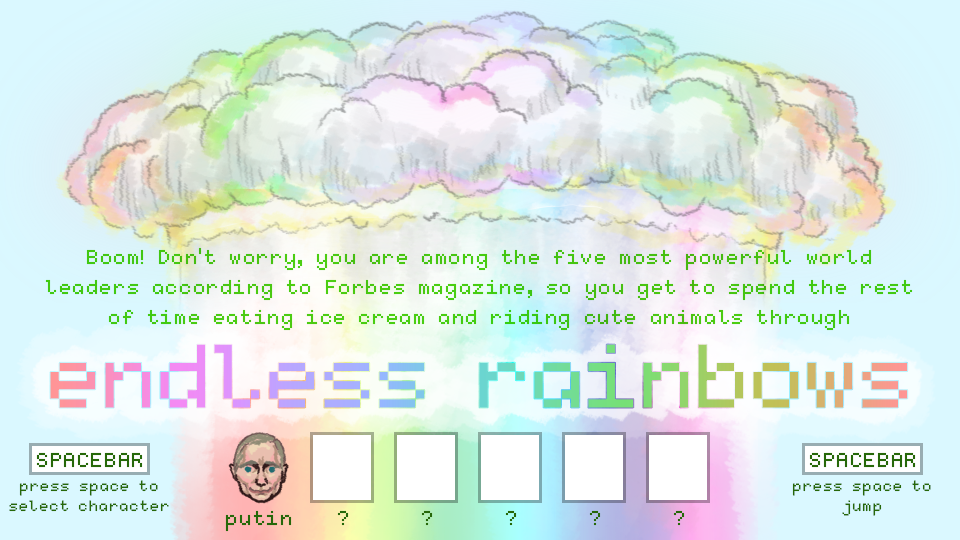
<style>
.page{position:relative;width:960px;height:540px}
.page>*{position:absolute;margin:0}
.t1{font:32px/30px "Kubasta";letter-spacing:0.05em;color:#46c911}
.t2{font:146px "Kubasta"}
.t3{font:32px "Kubasta";letter-spacing:0.05em;color:#266809}
.t4{font:24px "Kubasta";letter-spacing:0.05em;color:#266809}
.t5{font:32.2px "Kubasta";letter-spacing:0.05em;color:#266809}
</style>
<div class="page">
<p class="t1" style="left:45px;top:247px;width:868px;height:84px;text-align:center">Boom! Don't worry, you are among the five most powerful world leaders according to Forbes magazine, so you get to spend the rest of time eating ice cream and riding cute animals through</p>
<p class="t2" style="left:50px;top:344px;width:858px;height:64px">endless rainbows</p>
<p class="t3" style="left:36px;top:452px;width:107px;height:16px">SPACEBAR</p>
<p class="t3" style="left:809px;top:452px;width:107px;height:16px">SPACEBAR</p>
<p class="t4" style="left:9px;top:480px;width:160px;height:32px">press space to select character</p>
<p class="t4" style="left:792px;top:480px;width:139px;height:36px">press space to jump</p>
<p class="t3" style="left:225px;top:510px;width:67px;height:22px">putin</p>
<p class="t3" style="left:337px;top:510px;width:12px;height:16px">?</p>
<p class="t3" style="left:421px;top:510px;width:12px;height:16px">?</p>
<p class="t3" style="left:505px;top:510px;width:12px;height:16px">?</p>
<p class="t3" style="left:589px;top:510px;width:12px;height:16px">?</p>
<p class="t5" style="left:673px;top:510px;width:12px;height:16px">?</p>
</div>
